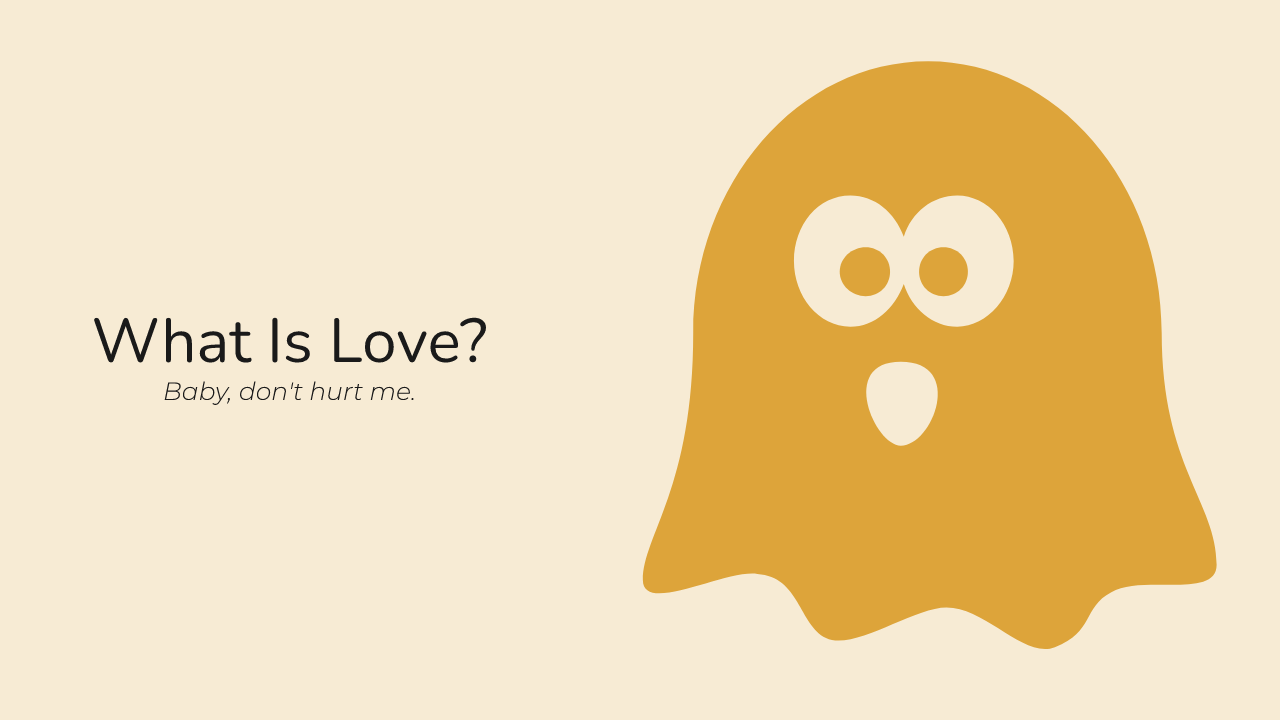
<style>
.page{position:relative;width:1280px;height:720px;background:#f7ebd4}
.page>*{position:absolute;margin:0}
.t1{font:62px "Nunito-Regular";color:#1a1a1a}
.t2{font:25px "Montserrat-LightItalic";color:#1a1a1a}
</style>
<div class="page">
<p class="t1" style="left:93px;top:317px;width:393px;height:46px">What Is Love?</p>
<p class="t2" style="left:164px;top:381px;width:250px;height:24px">Baby, don't hurt me.</p>
</div>
